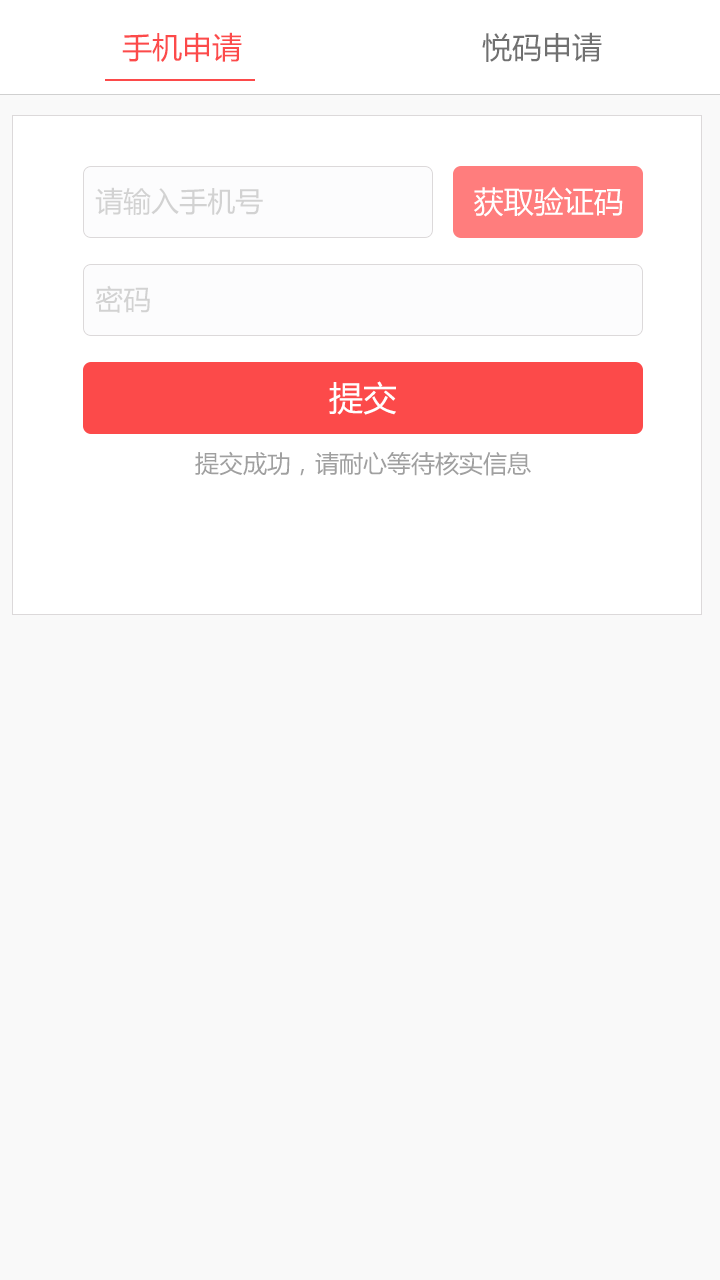
<style>
.page{position:relative;width:720px;height:1280px;background:#f9f9f9}
.page>*{position:absolute;margin:0}
.t1{font:30px "MicrosoftYaHei";color:#fc4a4a}
.t2{font:30px "MicrosoftYaHei";color:#707070}
.t3{font:28px "MicrosoftYaHei";color:#d2d2d2}
.t4{font:30px "MicrosoftYaHei";color:#ffffff}
.t5{font:34px "MicrosoftYaHei";color:#ffffff}
.t6{font:24px "MicrosoftYaHei";color:#a0a0a0}
</style>
<div class="page">
<p class="t1" style="left:122px;top:32px;width:120px;height:30px">手机申请</p>
<p class="t2" style="left:482px;top:32px;width:120px;height:30px">悦码申请</p>
<p class="t3" style="left:95px;top:187px;width:168px;height:28px">请输入手机号</p>
<p class="t4" style="left:474px;top:187px;width:149px;height:30px">获取验证码</p>
<p class="t3" style="left:95px;top:285px;width:55px;height:28px">密码</p>
<p class="t5" style="left:329px;top:381px;width:67px;height:34px">提交</p>
<p class="t6" style="left:195px;top:451px;width:336px;height:25px">提交成功，请耐心等待核实信息</p>
</div>
